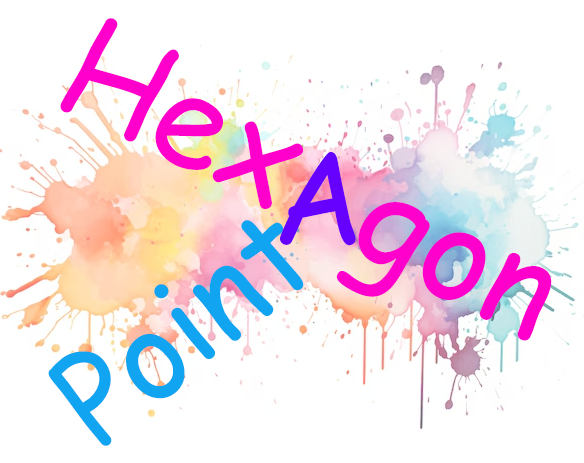
<style>
.page{position:relative;width:584px;height:463px;background:#ffffff}
.page>*{position:absolute;margin:0}
.t1{font:131.7px "ComicSansMS";color:#ff00cc}
.t2{font:126.4px "ComicSansMS";color:#6600ff}
.t3{font:124.2px "ComicSansMS";color:#11a5f1}
</style>
<div class="page">
<p class="t1" style="left:60px;top:18px;width:492px;height:323px;rotate:27deg">Hex  gon</p>
<p class="t2" style="left:280px;top:152px;width:76px;height:94px">A</p>
<p class="t3" style="left:48px;top:220px;width:256px;height:226px;rotate:-40deg">Point</p>
</div>
